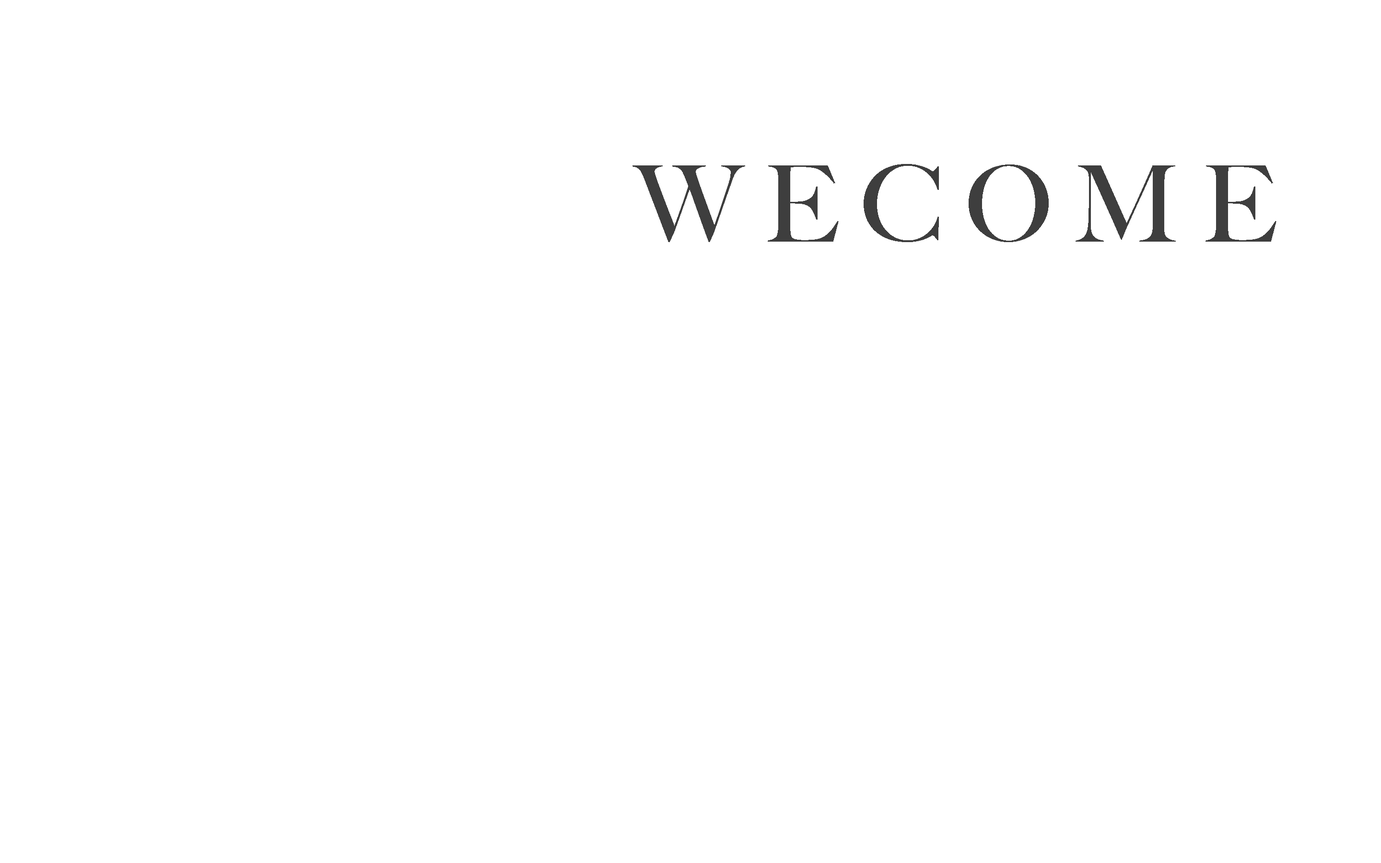
<style>
.page{position:relative;width:1381px;height:863px;background:#ffffff}
.page>*{position:absolute;margin:0}
.t1{font:105.8px "BigCaslon-Medium";letter-spacing:0.2em;color:#3e3e3e}
</style>
<div class="page">
<p class="t1" style="left:633px;top:164px;width:644px;height:78px">WECOME</p>
</div>
